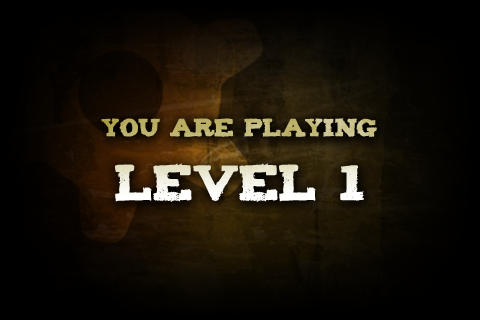
<style>
.page{position:relative;width:480px;height:320px}
.page>*{position:absolute;margin:0}
.t1{font:20px/64px "Tiza";color:#cddfa7}
.t2{font:41px/64px "Tiza";color:#ffffff}
</style>
<div class="page">
<p class="t1" style="left:101px;top:118px;width:276px;height:84px;text-align:center">YOU ARE PLAYING<br><span class="t2">LEVEL 1</span></p>
</div>
